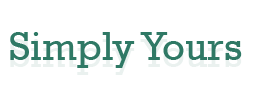
<style>
.page{position:relative;width:253px;height:95px;background:#ffffff}
.page>*{position:absolute;margin:0}
.t1{font:40px "Rockwell";color:#2f7965}
</style>
<div class="page">
<p class="t1" style="left:10px;top:32px;width:232px;height:36px">Simply Yours</p>
</div>
